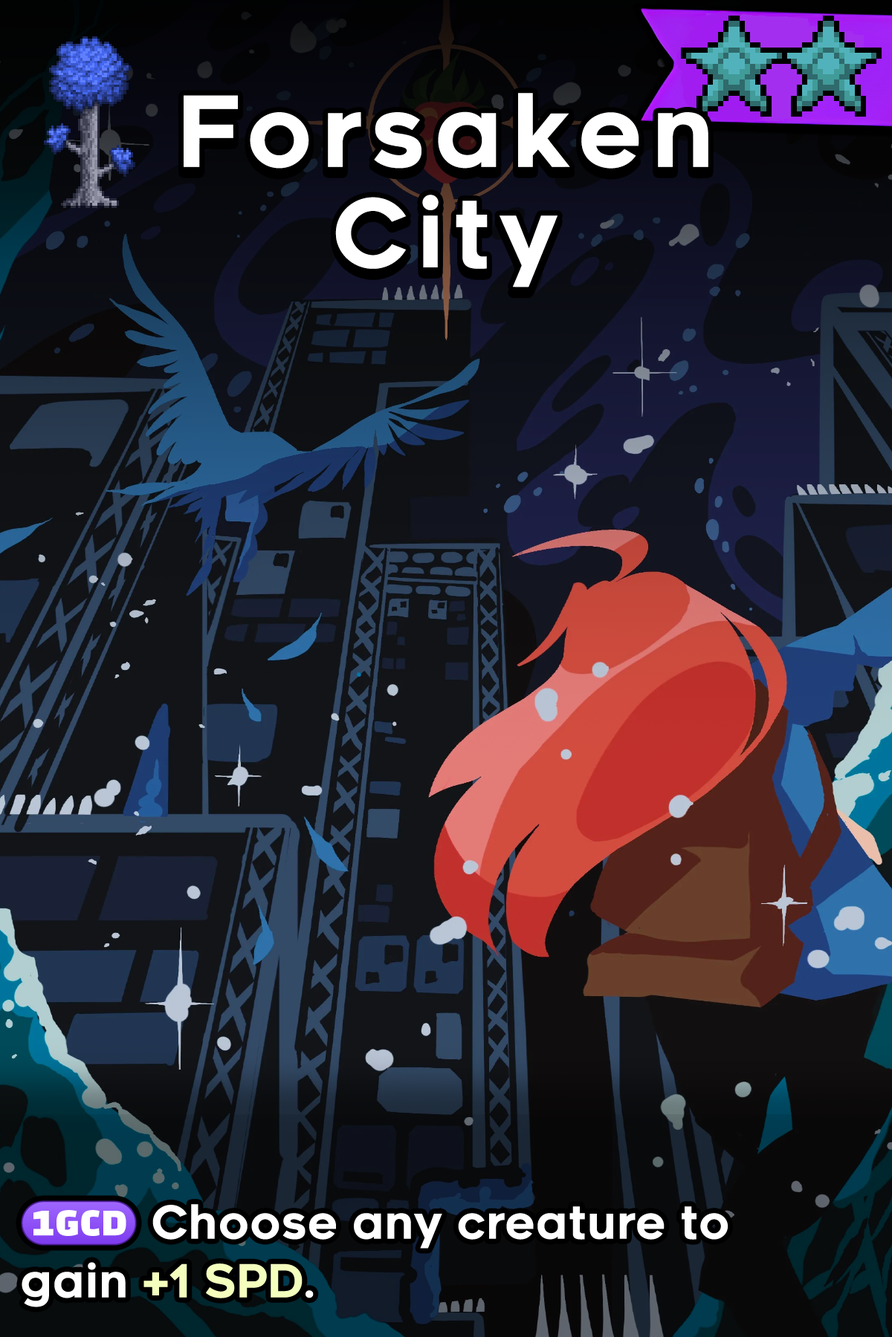
<style>
.page{position:relative;width:892px;height:1337px}
.page>*{position:absolute;margin:0}
.t1{font:167px/102.4px "Renogare-Regular";letter-spacing:0.08em;color:#ffffff}
.t2{font:161.7px/102.4px "Renogare-Regular";letter-spacing:0.08em;color:#ffffff}
.t3{font:78px "Renogare-Regular";color:#ffffff}
.t4{font:45.5px "stoogedings-Regular";color:#ffffff}
.t5{font:78px "Renogare-Regular";color:#f4ffbe}
</style>
<div class="page">
<p class="t1" style="left:184px;top:93px;width:524px;height:195px;text-align:center">Forsaken<br><span class="t2">City</span></p>
<p class="t3" style="left:21px;top:1201px;width:707px;height:107px"><span class="t4">(1GCD)</span> Choose any creature to gain <span class="t5">+1 SPD</span>.</p>
</div>
